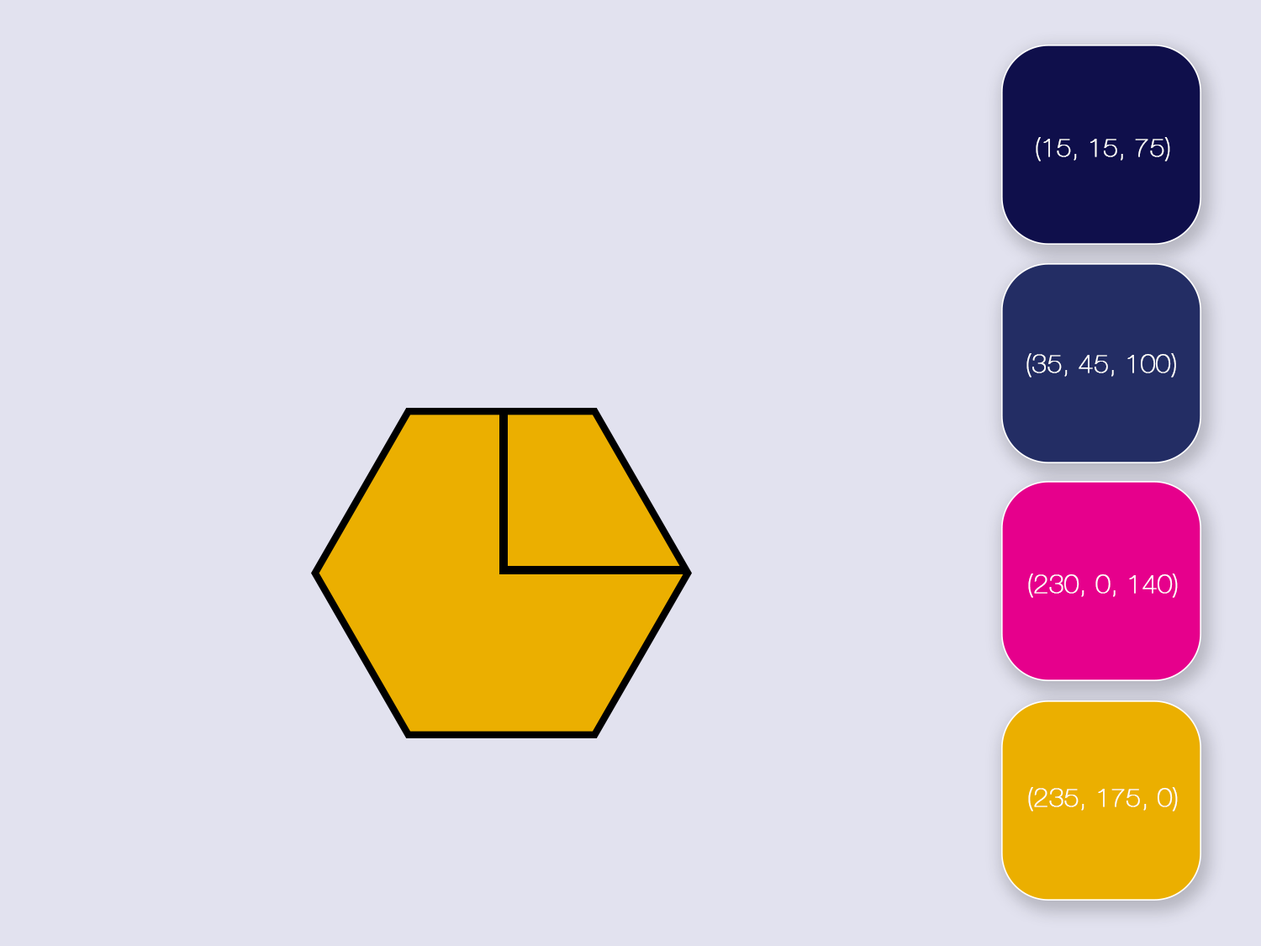
<style>
.page{position:relative;width:1261px;height:946px;background:#e2e2ef}
.page>*{position:absolute;margin:0}
.t1{font:26.3px "HelveticaNeue-UltraLight";color:#ffffff;font-weight:bold}
</style>
<div class="page">
<p class="t1" style="left:1036px;top:137px;width:134px;height:24px">(15, 15, 75)</p>
<p class="t1" style="left:1026px;top:353px;width:150px;height:24px">(35, 45, 100)</p>
<p class="t1" style="left:1028px;top:573px;width:150px;height:25px">(230, 0, 140)</p>
<p class="t1" style="left:1028px;top:787px;width:150px;height:24px">(235, 175, 0)</p>
</div>
